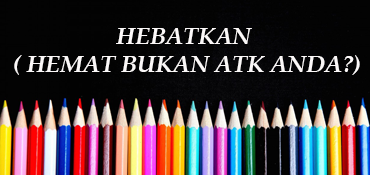
<style>
.page{position:relative;width:370px;height:175px;background:#030303}
.page>*{position:absolute;margin:0}
.t1{font:24px "BookAntiqua-BoldItalic";color:#fbf8f8}
</style>
<div class="page">
<p class="t1" style="left:14px;top:28px;width:346px;height:47px;text-align:center">HEBATKAN <br>( HEMAT BUKAN ATK ANDA?)</p>
</div>
